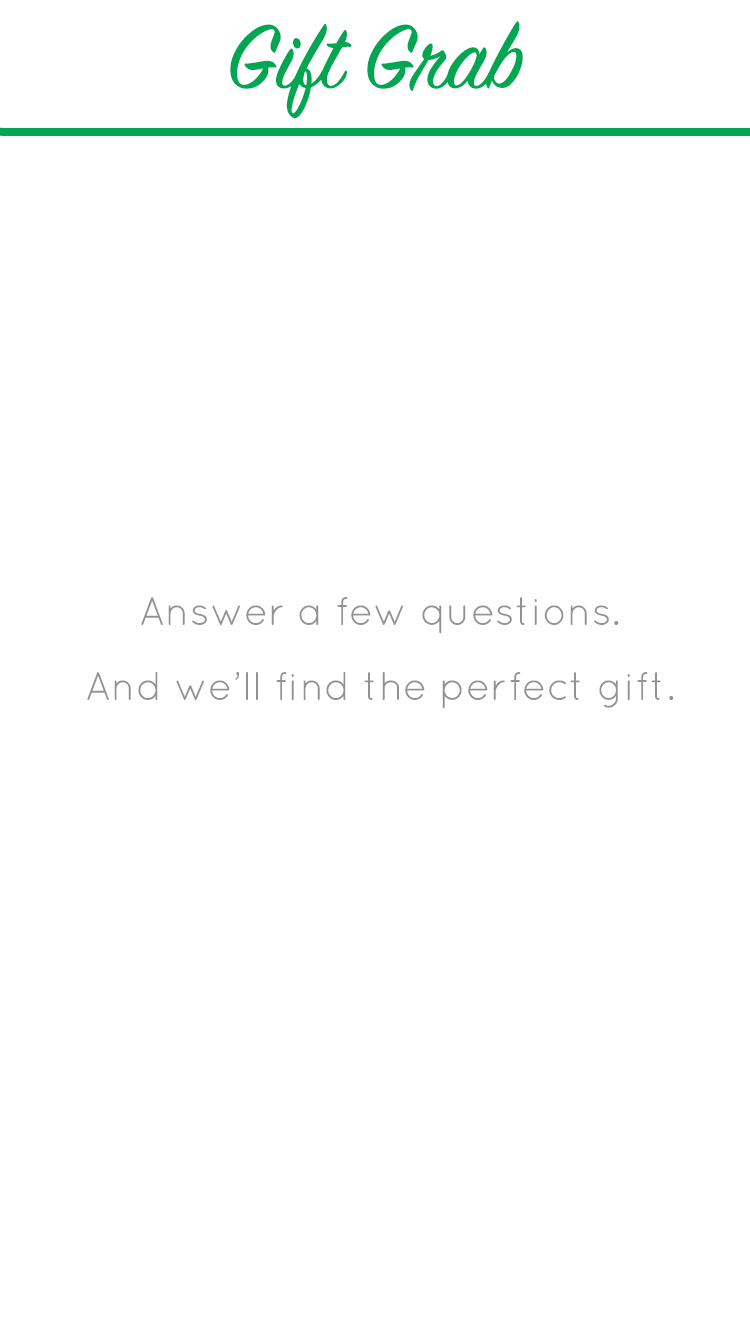
<style>
.page{position:relative;width:750px;height:1334px;background:#ffffff}
.page>*{position:absolute;margin:0}
.t1{font:100px "SignPainter-HouseScript";color:#00a651}
.t2{font:40px "Quicksand-Regular";color:#929292}
</style>
<div class="page">
<p class="t1" style="left:230px;top:21px;width:293px;height:98px">Gift Grab</p>
<p class="t2" style="left:141px;top:597px;width:478px;height:37px">Answer a few questions.</p>
<p class="t2" style="left:87px;top:671px;width:587px;height:38px">And we’ll find the perfect gift.</p>
</div>
